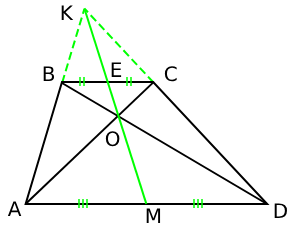
<style>
.page{position:relative;width:297px;height:229px;background:#ffffff}
.page>*{position:absolute;margin:0}
.t1{font:20px "DejaVuSans";color:#000000}
</style>
<div class="page">
<p class="t1" style="left:61px;top:5px;width:13px;height:15px">K</p>
<p class="t1" style="left:111px;top:62px;width:11px;height:15px">E</p>
<p class="t1" style="left:43px;top:66px;width:12px;height:15px">B</p>
<p class="t1" style="left:164px;top:66px;width:13px;height:16px">C</p>
<p class="t1" style="left:105px;top:131px;width:15px;height:16px">O</p>
<p class="t1" style="left:7px;top:201px;width:15px;height:15px">A</p>
<p class="t1" style="left:146px;top:208px;width:15px;height:15px">M</p>
<p class="t1" style="left:274px;top:203px;width:13px;height:15px">D</p>
</div>
